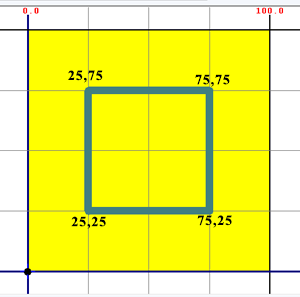
<style>
.page{position:relative;width:300px;height:297px;background:#ffff00}
.page>*{position:absolute;margin:0}
.t1{font:14px "TimesNewRomanPS-BoldMT";letter-spacing:0.06em;color:#000000}
</style>
<div class="page">
<p class="t1" style="left:68px;top:70px;width:35px;height:13px">25,75</p>
<p class="t1" style="left:195px;top:74px;width:35px;height:13px">75,75</p>
<p class="t1" style="left:71px;top:216px;width:35px;height:13px">25,25</p>
<p class="t1" style="left:197px;top:215px;width:35px;height:13px">75,25</p>
</div>
